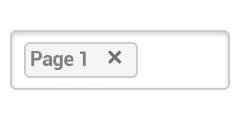
<style>
.page{position:relative;width:240px;height:120px;background:#ffffff}
.page>*{position:absolute;margin:0}
.t1{font:20px "Roboto-Bold";letter-spacing:-0.02em;color:#808080}
</style>
<div class="page">
<p class="t1" style="left:31px;top:51px;width:55px;height:19px">Page 1</p>
</div>
